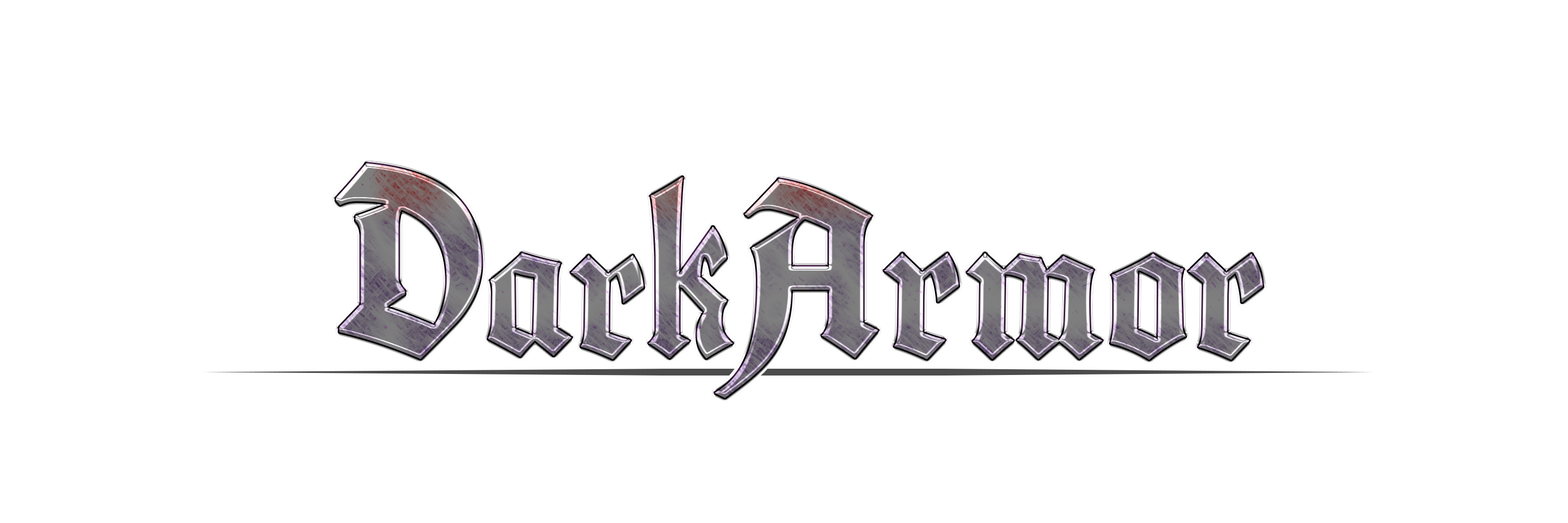
<style>
.page{position:relative;width:1568px;height:523px;background:#ffffff}
.page>*{position:absolute;margin:0}
.t1{font:261.3px "Cabazon";letter-spacing:0.05em;font-weight:bold;scale:0.9 1}
.t2{font:261.3px "Cabazon";letter-spacing:0.05em}
.t3{font:205.6px "Cabazon";letter-spacing:0.05em}
.t4{font:210.5px "Cabazon";letter-spacing:0.05em}
</style>
<div class="page">
<p class="t1" style="left:336px;top:163px;width:146px;height:196px">D</p>
<p class="t2" style="left:715px;top:179px;width:163px;height:219px">A</p>
<p class="t3" style="left:488px;top:253px;width:84px;height:103px">a</p>
<p class="t3" style="left:571px;top:255px;width:73px;height:104px">r</p>
<p class="t4" style="left:884px;top:253px;width:75px;height:106px">r</p>
<p class="t4" style="left:967px;top:253px;width:135px;height:106px">m</p>
<p class="t4" style="left:1110px;top:253px;width:76px;height:107px">o</p>
<p class="t4" style="left:1188px;top:253px;width:75px;height:107px">r</p>
</div>
